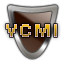
<style>
.page{position:relative;width:64px;height:64px;background:#ffffff}
.page>*{position:absolute;margin:0}
.t1{font:17.2px "Small Fonts";font-weight:bold}
</style>
<div class="page">
<p class="t1" style="left:6px;top:24px;width:51px;height:13px">VCMI</p>
</div>
